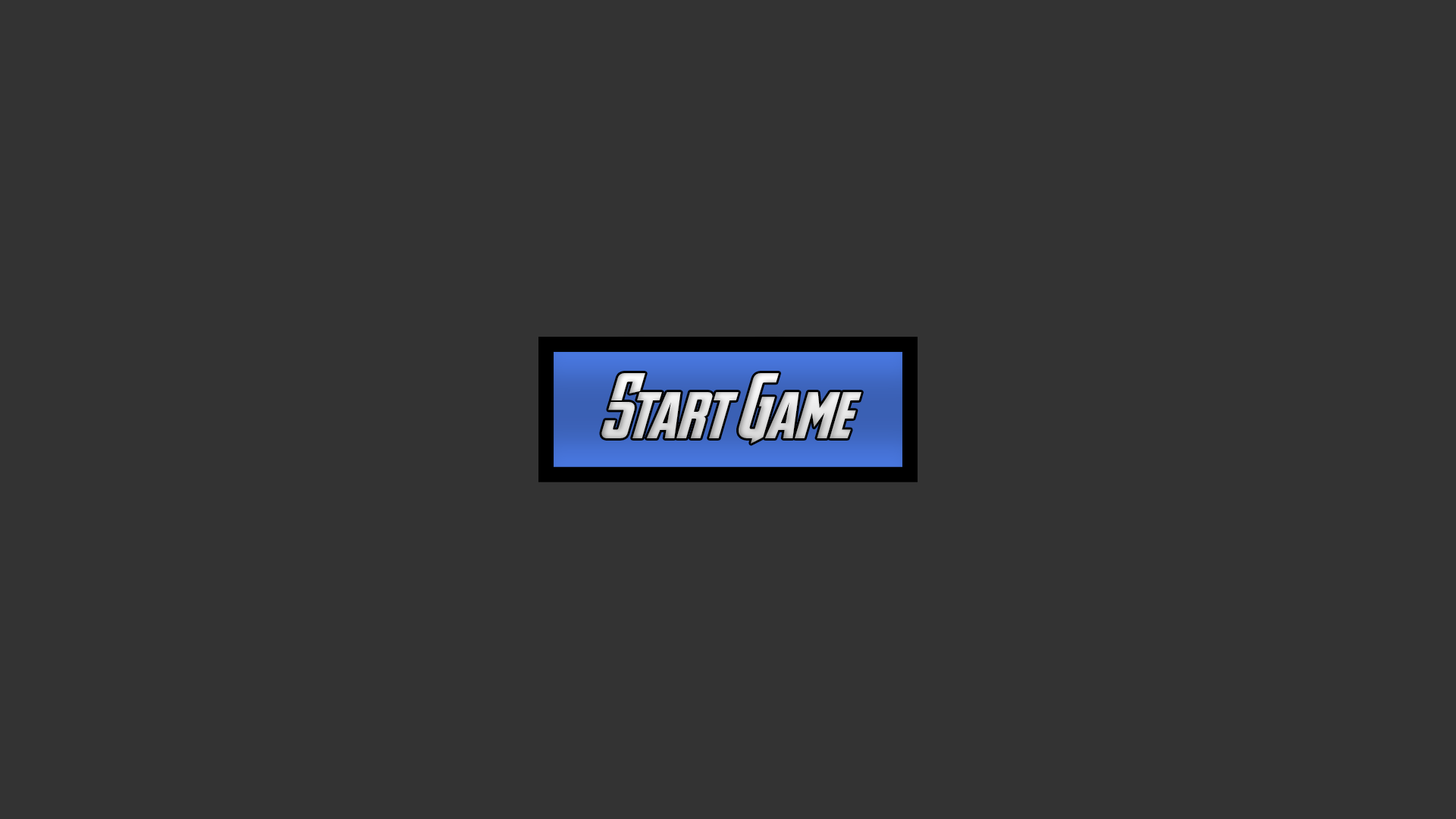
<style>
.page{position:relative;width:1456px;height:819px;background:#333333}
.page>*{position:absolute;margin:0}
.t1{font:63.5px "AvengeanceHeroicAvengerNormal"}
</style>
<div class="page">
<p class="t1" style="left:601px;top:373px;width:260px;height:71px">Start Game</p>
</div>
